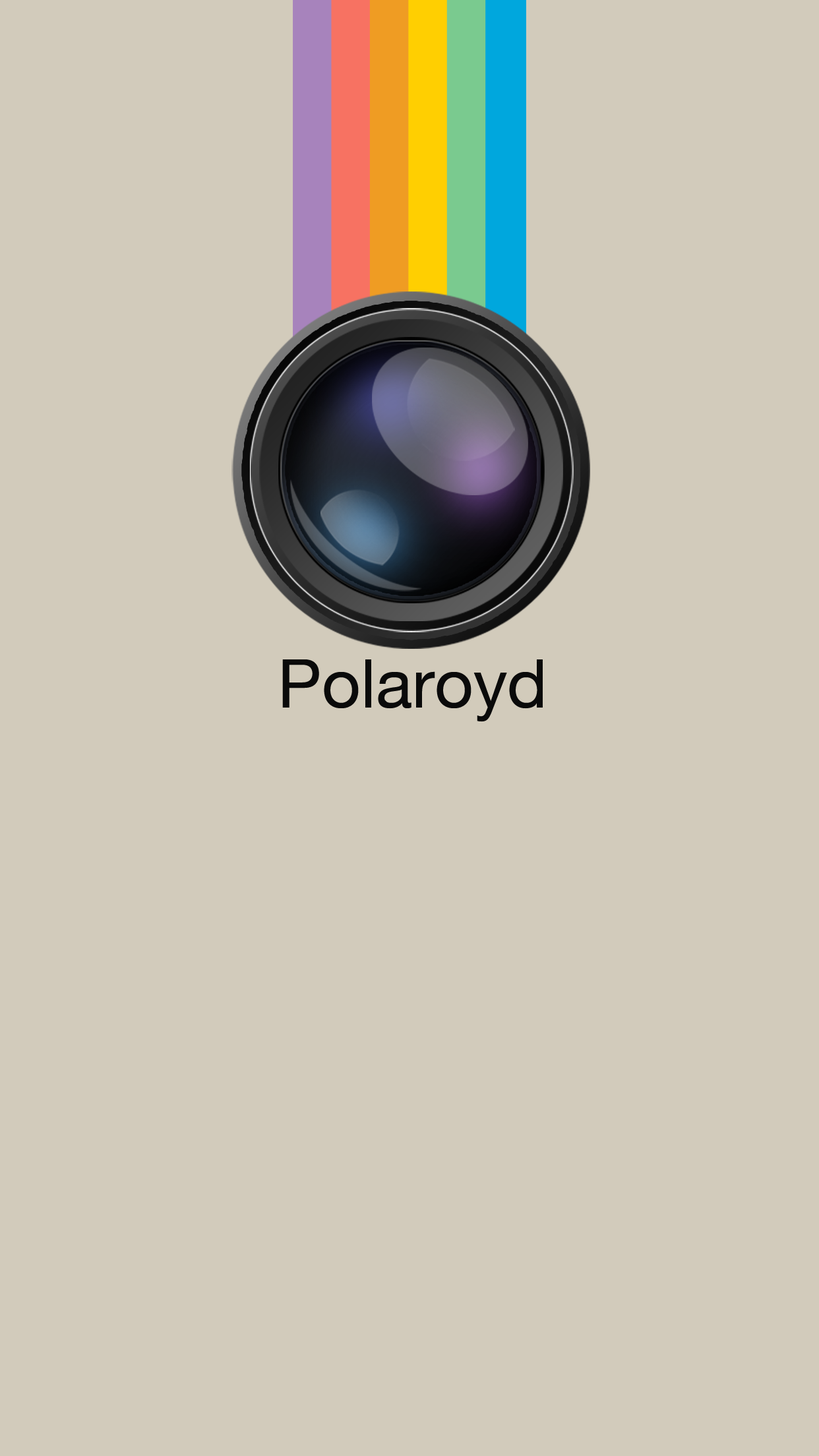
<style>
.page{position:relative;width:819px;height:1456px;background:#d2cbbb}
.page>*{position:absolute;margin:0}
.t1{font:67.7px "HelveticaNeue";color:#0a0a0a}
</style>
<div class="page">
<p class="t1" style="left:282px;top:659px;width:261px;height:63px">Polaroyd</p>
</div>
